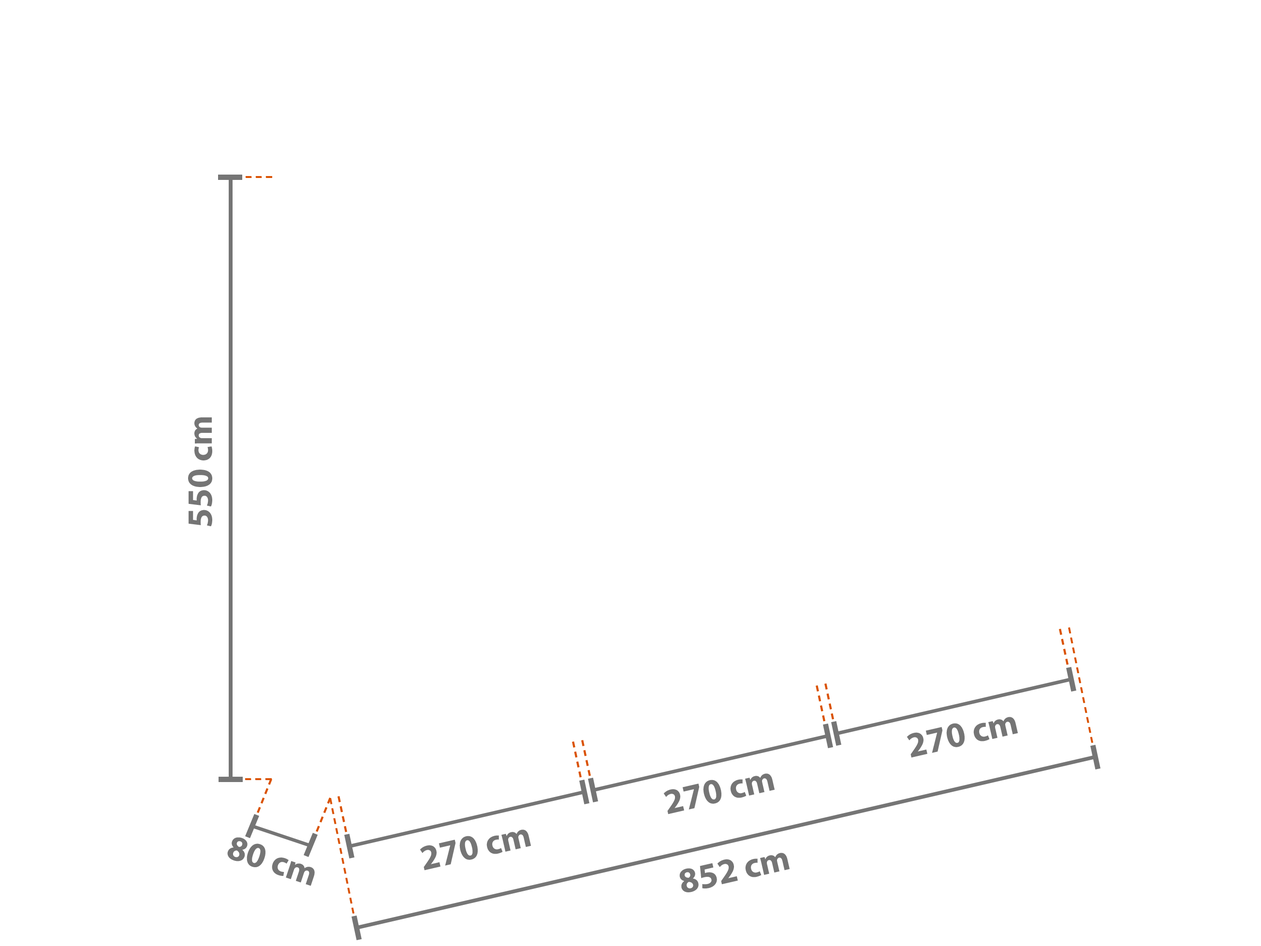
<style>
.page{position:relative;width:1261px;height:946px;background:#ffffff}
.page>*{position:absolute;margin:0}
.t1{font:35.5px "MyriadPro-Bold";color:#757575}
</style>
<div class="page">
<p class="t1" style="left:188px;top:417px;width:24px;height:110px;rotate:-90deg">550 cm</p>
<p class="t1" style="left:907px;top:717px;width:111px;height:41px;rotate:-13deg">270 cm</p>
<p class="t1" style="left:663px;top:773px;width:112px;height:41px;rotate:-13deg">270 cm</p>
<p class="t1" style="left:420px;top:829px;width:111px;height:41px;rotate:-13deg">270 cm</p>
<p class="t1" style="left:227px;top:837px;width:88px;height:49px;text-align:center;rotate:18deg">80 cm<br> cm</p>
<p class="t1" style="left:679px;top:852px;width:111px;height:40px;rotate:-13deg">852 cm</p>
</div>
